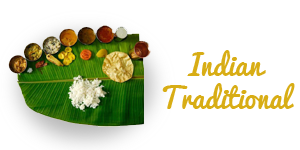
<style>
.page{position:relative;width:300px;height:150px;background:#ffffff}
.page>*{position:absolute;margin:0}
.t1{font:27.8px "Pacifico";color:#d8ad15}
</style>
<div class="page">
<p class="t1" style="left:162px;top:50px;width:133px;height:59px;text-align:center">Indian<br>Traditional</p>
</div>
